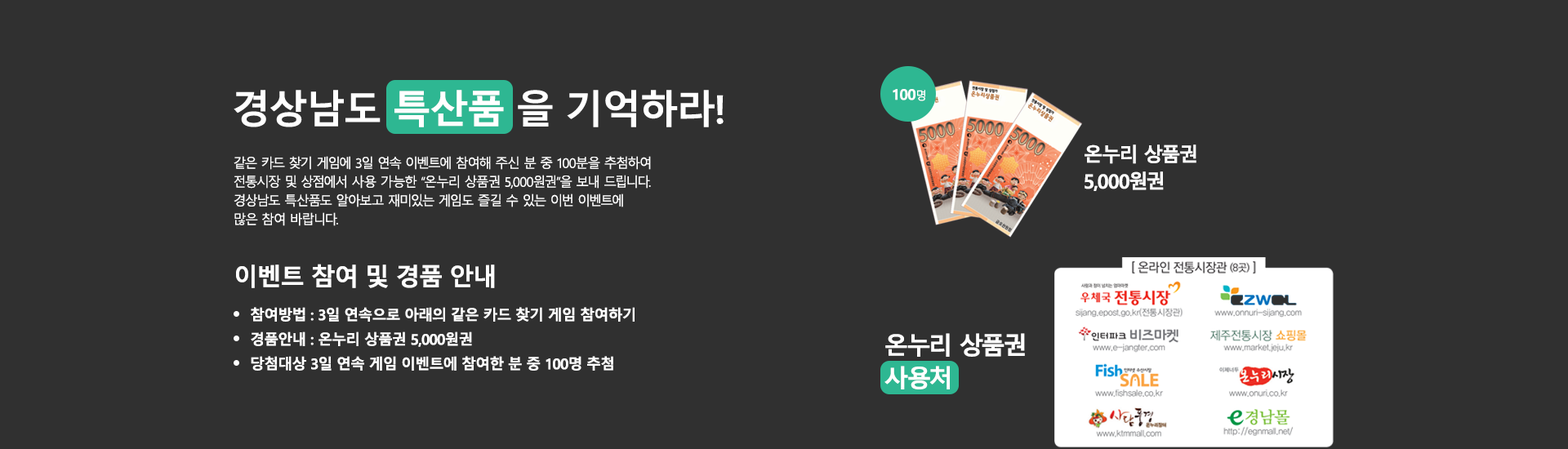
<style>
.page{position:relative;width:1568px;height:449px;background:#303030}
.page>*{position:absolute;margin:0}
.t1{font:14.7px "MalgunGothicBold";letter-spacing:-0.05em;color:#ffffff}
.t2{font:11.4px "MalgunGothic";letter-spacing:-0.05em;color:#ffffff}
.t3{font:19.6px/26.9px "MalgunGothicBold";letter-spacing:-0.05em;color:#ffffff}
.t4{font:13.1px/18.8px "MalgunGothic";letter-spacing:-0.05em;color:#ffffff}
.t5{font:24.5px "MalgunGothicBold";letter-spacing:-0.05em;color:#ffffff}
.t6{font:24.5px/32.7px "MalgunGothicBold";letter-spacing:-0.05em;color:#ffffff}
</style>
<div class="page">
<p class="t1" style="left:893px;top:89px;width:32px;height:12px">100<span class="t2">명</span></p>
<p class="t3" style="left:1085px;top:145px;width:111px;height:46px">온누리 상품권<br>5,000원권</p>
<p class="t4" style="left:234px;top:156px;width:417px;height:70px">같은 카드 찾기 게임에 3일 연속 이벤트에 참여해 주신 분 중 100분을 추첨하여 <br>전통시장 및 상점에서 사용 가능한 “온누리 상품권 5,000원권”을 보내 드립니다.<br>경상남도 특산품도 알아보고 재미있는 게임도 즐길 수 있는 이번 이벤트에<br>많은 참여 바랍니다.</p>
<p class="t5" style="left:236px;top:264px;width:259px;height:24px">이벤트 참여 및 경품 안내</p>
<p class="t1" style="left:251px;top:307px;width:384px;height:15px">참여방법 : 3일 연속으로 아래의 같은 카드 찾기 게임 참여하기</p>
<p class="t1" style="left:251px;top:332px;width:221px;height:15px">경품안내 : 온누리 상품권 5,000원권</p>
<p class="t6" style="left:884px;top:333px;width:141px;height:57px">온누리 상품권<br>사용처</p>
<p class="t1" style="left:251px;top:356px;width:362px;height:15px">당첨대상 3일 연속 게임 이벤트에 참여한 분 중 100명 추첨</p>
</div>
